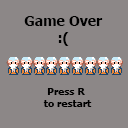
<style>
.page{position:relative;width:128px;height:128px;background:#8c8787}
.page>*{position:absolute;margin:0}
.t1{font:14px "Tahoma-Bold";color:#000000}
.t2{font:10px "Tahoma-Bold";color:#000000}
</style>
<div class="page">
<p class="t1" style="left:24px;top:16px;width:79px;height:30px;text-align:center">Game Over<br>:(</p>
<p class="t2" style="left:43px;top:88px;width:49px;height:19px;text-align:center">Press R <br>to restart</p>
</div>
